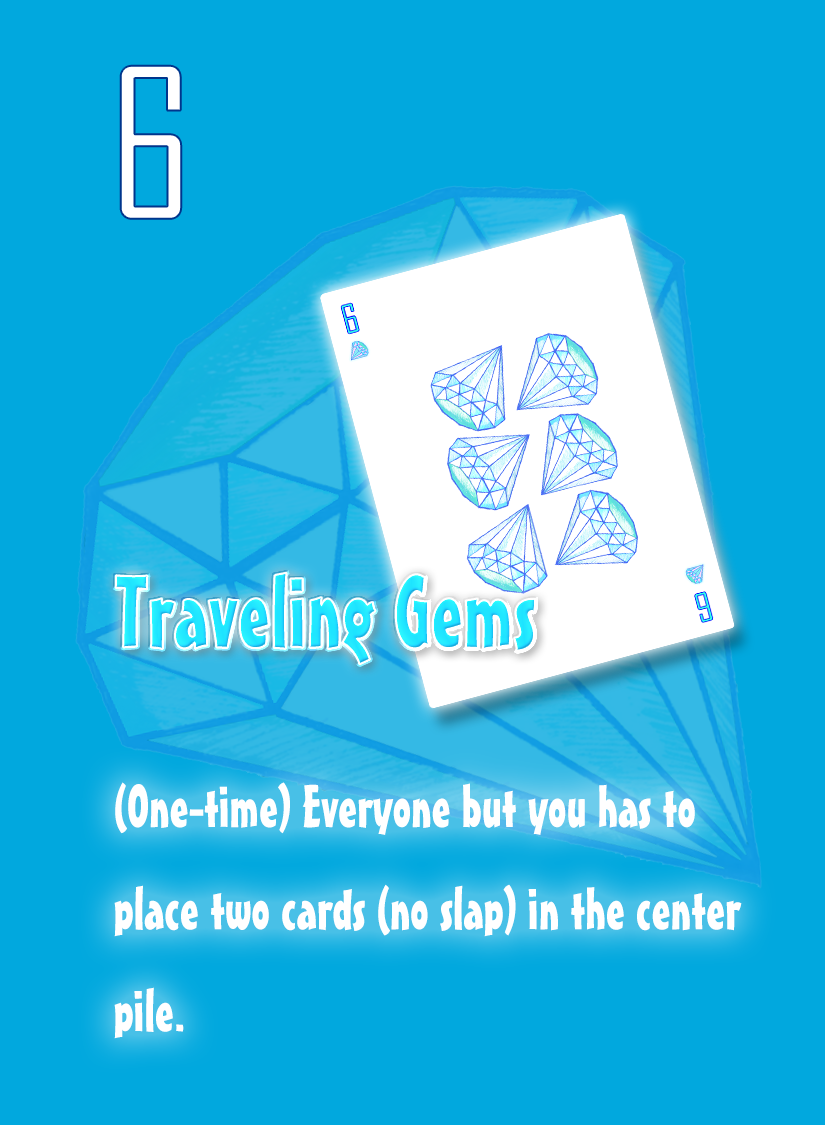
<style>
.page{position:relative;width:825px;height:1125px;background:#01a8de}
.page>*{position:absolute;margin:0}
.t1{font:200px "AgencyFB-Reg";color:#ffffff}
.t2{font:100px "MisterEarlBT-Regular";color:#22e7ff}
.t3{font:58.3px "MisterEarlBT-Regular";color:#ffffff}
</style>
<div class="page">
<p class="t1" style="left:120px;top:65px;width:62px;height:154px">6</p>
<p class="t2" style="left:115px;top:572px;width:420px;height:92px">Traveling Gems</p>
<p class="t3" style="left:114px;top:782px;width:628px;height:257px">(One-time) Everyone but you has to <br>place two cards (no slap) in the center <br>pile.</p>
</div>
